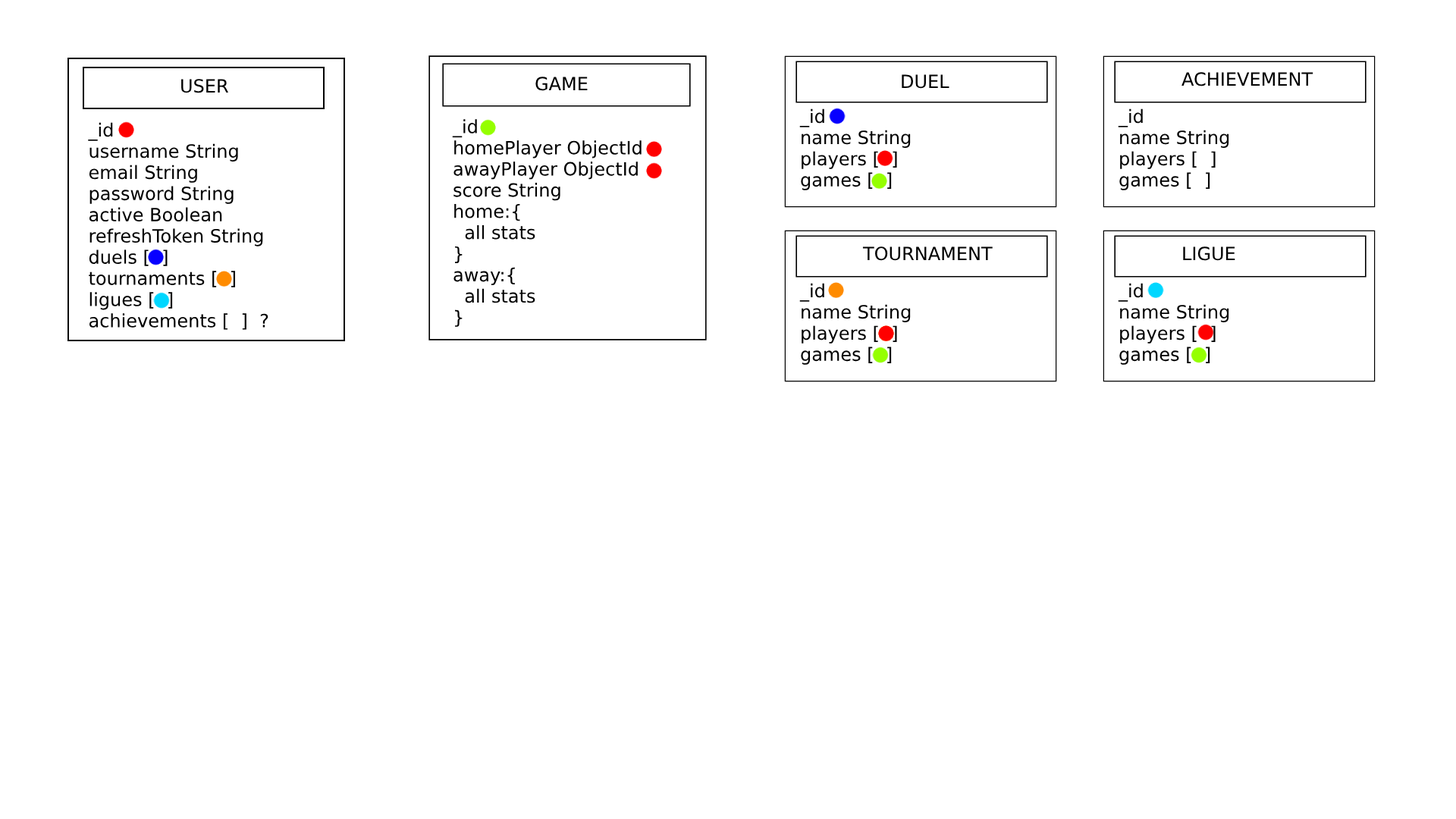
<style>
.page{position:relative;width:1456px;height:819px;background:#ffffff}
.page>*{position:absolute;margin:0}
.t1{font:18.2px "DejaVuSans";color:#000000}
</style>
<div class="page">
<p class="t1" style="left:535px;top:77px;width:53px;height:14px">GAME</p>
<p class="t1" style="left:902px;top:74px;width:47px;height:15px">DUEL</p>
<p class="t1" style="left:1181px;top:72px;width:132px;height:14px">ACHIEVEMENT</p>
<p class="t1" style="left:181px;top:79px;width:47px;height:14px">USER</p>
<p class="t1" style="left:799px;top:108px;width:112px;height:82px">_id<br>name String<br>players [  ]<br>games [  ]</p>
<p class="t1" style="left:1118px;top:108px;width:111px;height:82px">_id<br>name String<br>players [  ]<br>games [  ]</p>
<p class="t1" style="left:88px;top:122px;width:180px;height:208px">_id<br>username String<br>email String<br>password String<br>active Boolean<br>refreshToken String<br>duels [  ]<br>tournaments [  ]<br>ligues [  ]<br>achievements [  ]  ?</p>
<p class="t1" style="left:452px;top:119px;width:190px;height:208px">_id<br>homePlayer ObjectId<br>awayPlayer ObjectId<br>score String<br>home:{<br>  all stats<br>}<br>away:{<br>  all stats<br>}</p>
<p class="t1" style="left:862px;top:246px;width:131px;height:15px">TOURNAMENT</p>
<p class="t1" style="left:1183px;top:246px;width:52px;height:15px">LIGUE</p>
<p class="t1" style="left:799px;top:283px;width:112px;height:82px">_id<br>name String<br>players [  ]<br>games [  ]</p>
<p class="t1" style="left:1118px;top:283px;width:111px;height:82px">_id<br>name String<br>players [  ]<br>games [  ]</p>
</div>
